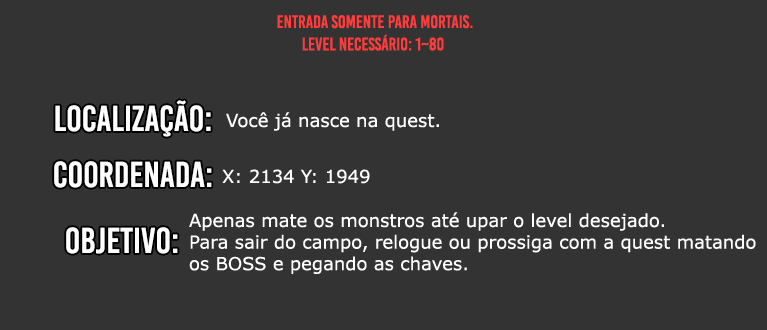
<style>
.page{position:relative;width:767px;height:330px;background:#333333}
.page>*{position:absolute;margin:0}
.t1{font:18px "BebasKai";color:#ff3b3b}
.t2{font:36px "BebasKai";color:#fefefe}
.t3{font:18px "Verdana";color:#fefefe}
</style>
<div class="page">
<p class="t1" style="left:277px;top:15px;width:196px;height:14px">Entrada somente para mortais.</p>
<p class="t1" style="left:302px;top:34px;width:142px;height:17px">level necessário: 1~80</p>
<p class="t2" style="left:55px;top:100px;width:156px;height:37px">localização:</p>
<p class="t3" style="left:226px;top:112px;width:213px;height:19px">Você já nasce na quest.</p>
<p class="t2" style="left:54px;top:161px;width:158px;height:27px">Coordenada:</p>
<p class="t3" style="left:222px;top:169px;width:148px;height:15px">X: 2134 Y: 1949</p>
<p class="t3" style="left:189px;top:212px;width:567px;height:62px">Apenas mate os monstros até upar o level desejado.<br>Para sair do campo, relogue ou prossiga com a quest matando<br>os BOSS e pegando as chaves.</p>
<p class="t2" style="left:66px;top:227px;width:112px;height:27px">objetivo:</p>
</div>
